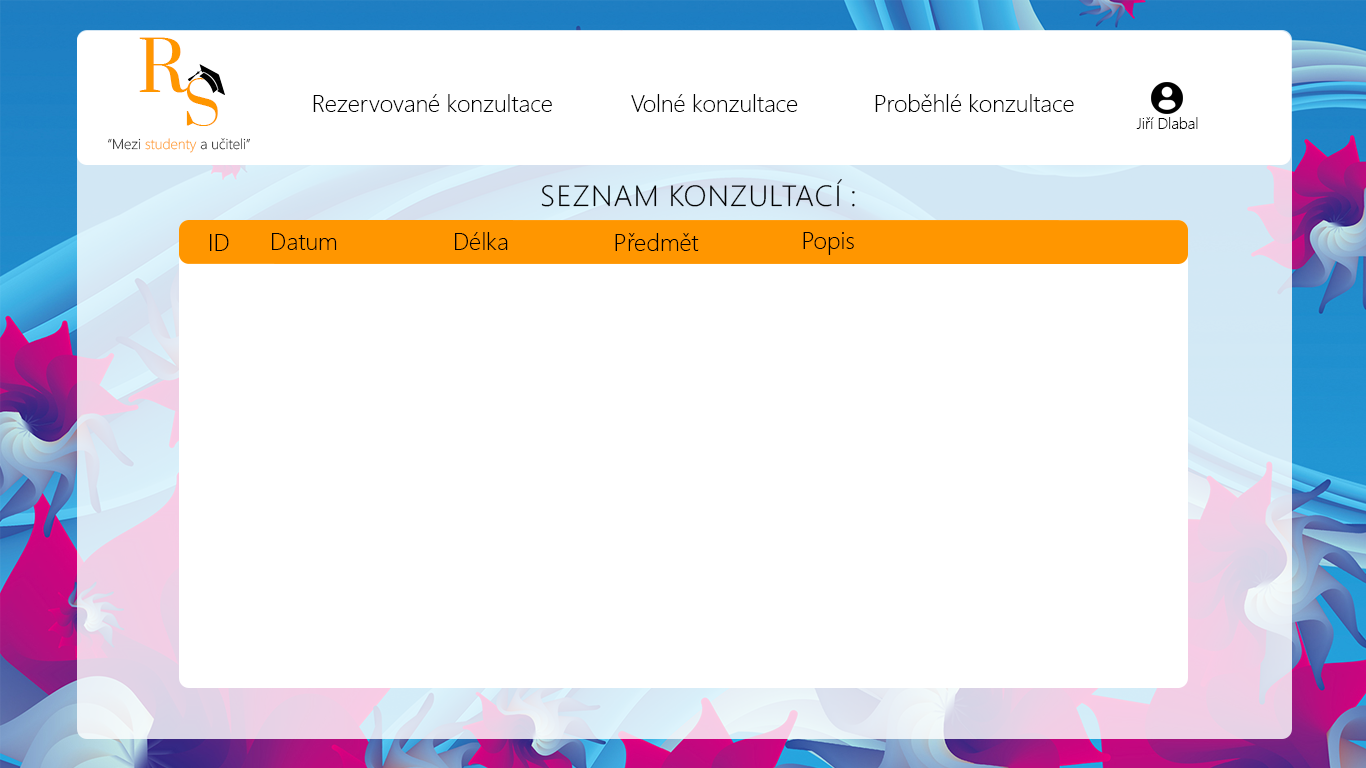
<style>
.page{position:relative;width:1366px;height:768px;background:#ffffff}
.page>*{position:absolute;margin:0}
.t1{font:68.6px "Prata-Regular";color:#ff9600}
.t2{font:56.8px "Prata-Regular";color:#ff9600}
.t3{font:23.7px "SegoeUI-Light";color:#000000}
.t4{font:15.5px "SegoeUI-Light";color:#000000}
.t5{font:14.3px "SegoeUIVariable-LightText"}
.t6{font:29.1px "SegoeUI-Light";color:#000000;text-transform:uppercase;scale:1.04 1}
.t7{font:24px "SegoeUI-Light";color:#000000}
</style>
<div class="page">
<p class="t1" style="left:139px;top:37px;width:50px;height:56px">R</p>
<p class="t2" style="left:186px;top:78px;width:32px;height:48px">S</p>
<p class="t3" style="left:313px;top:94px;width:239px;height:18px">Rezervované konzultace</p>
<p class="t3" style="left:631px;top:94px;width:167px;height:18px">Volné konzultace</p>
<p class="t3" style="left:875px;top:94px;width:199px;height:18px">Proběhlé konzultace</p>
<p class="t4" style="left:1136px;top:117px;width:62px;height:12px">Jiří Dlabal</p>
<p class="t5" style="left:108px;top:138px;width:142px;height:15px">“Mezi studenty a učiteli”</p>
<p class="t6" style="left:541px;top:179px;width:314px;height:28px">Seznam konzultací :</p>
<p class="t7" style="left:272px;top:233px;width:65px;height:17px">Datum</p>
<p class="t7" style="left:455px;top:232px;width:53px;height:18px">Délka</p>
<p class="t7" style="left:615px;top:233px;width:84px;height:18px">Předmět</p>
<p class="t7" style="left:803px;top:232px;width:51px;height:23px">Popis</p>
<p class="t7" style="left:210px;top:234px;width:19px;height:17px">ID</p>
</div>
